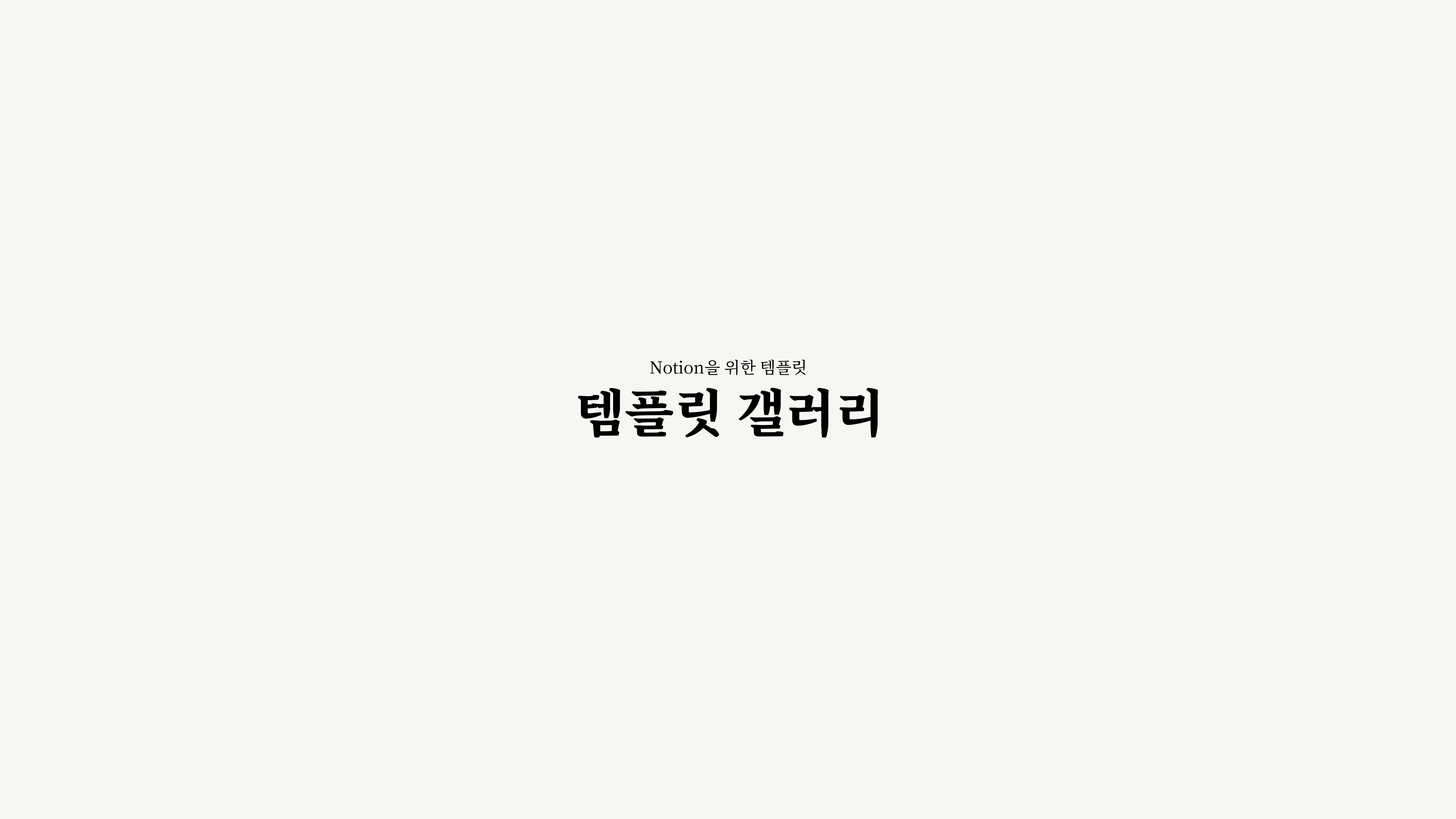
<style>
.page{position:relative;width:1456px;height:819px;background:#f7f6f3}
.page>*{position:absolute;margin:0}
.t1{font:16.3px "NotoSerifKR-Medium";color:#000000}
.t2{font:51.2px "NotoSerifKR-Black";color:#000000}
</style>
<div class="page">
<p class="t1" style="left:650px;top:359px;width:156px;height:16px">Notion을 위한 템플릿</p>
<p class="t2" style="left:578px;top:388px;width:300px;height:50px">템플릿 갤러리</p>
</div>
